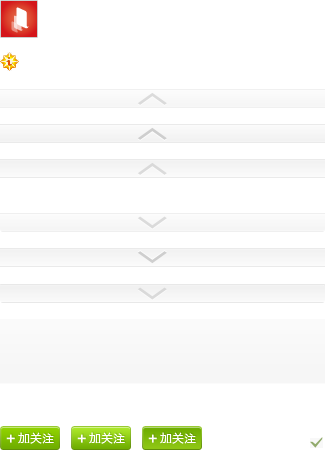
<style>
.page{position:relative;width:325px;height:450px;background:#ffffff}
.page>*{position:absolute;margin:0}
.t1{font:12px "HiraginoSansGB-W3";color:#ffffff}
</style>
<div class="page">
<p class="t1" style="left:18px;top:432px;width:36px;height:12px">加关注</p>
<p class="t1" style="left:89px;top:432px;width:36px;height:12px">加关注</p>
<p class="t1" style="left:160px;top:432px;width:36px;height:12px">加关注</p>
</div>
